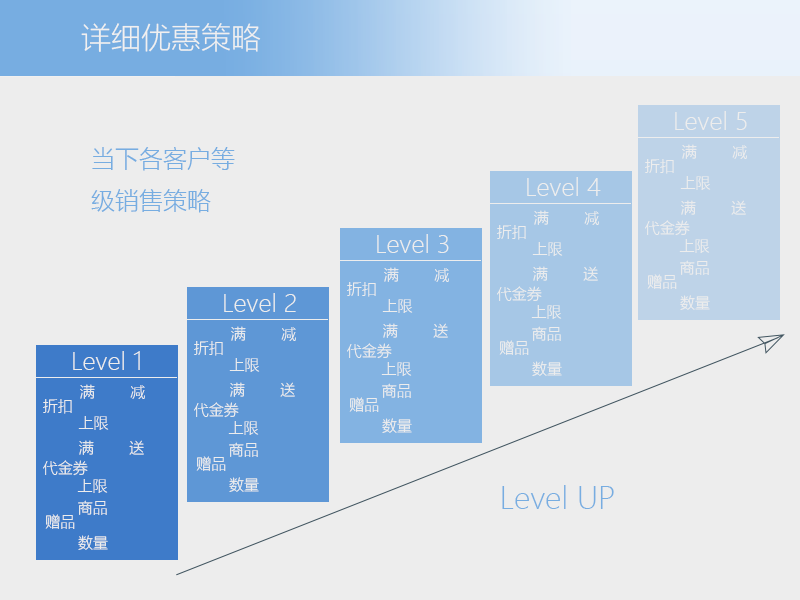
<style>
.page{position:relative;width:800px;height:600px;background:#ededed}
.page>*{position:absolute;margin:0}
.t1{font:30px "MicrosoftYaHeiLight";color:#f1f0f0}
.t2{font:24px "MicrosoftYaHeiLight";color:#ededed}
.t3{font:24px "MicrosoftYaHeiLight";color:#77ade1}
.t4{font:15px "MicrosoftYaHeiLight";color:#ededed}
.t5{font:30px "MicrosoftYaHeiLight";color:#77ade1}
</style>
<div class="page">
<p class="t1" style="left:81px;top:23px;width:180px;height:29px">详细优惠策略</p>
<p class="t2" style="left:675px;top:111px;width:72px;height:19px">Level 5</p>
<p class="t3" style="left:91px;top:147px;width:144px;height:66px">当下各客户等<br>级销售策略</p>
<p class="t4" style="left:682px;top:144px;width:65px;height:15px">满        减</p>
<p class="t4" style="left:645px;top:159px;width:29px;height:15px">折扣</p>
<p class="t2" style="left:527px;top:177px;width:74px;height:19px">Level 4</p>
<p class="t4" style="left:680px;top:176px;width:31px;height:14px">上限</p>
<p class="t4" style="left:681px;top:200px;width:65px;height:15px">满        送</p>
<p class="t4" style="left:534px;top:210px;width:65px;height:15px">满        减</p>
<p class="t4" style="left:645px;top:220px;width:45px;height:16px">代金券</p>
<p class="t4" style="left:497px;top:225px;width:29px;height:15px">折扣</p>
<p class="t2" style="left:377px;top:234px;width:72px;height:19px">Level 3</p>
<p class="t4" style="left:532px;top:242px;width:31px;height:14px">上限</p>
<p class="t4" style="left:679px;top:239px;width:31px;height:14px">上限</p>
<p class="t4" style="left:384px;top:267px;width:65px;height:15px">满        减</p>
<p class="t4" style="left:533px;top:266px;width:65px;height:15px">满        送</p>
<p class="t4" style="left:680px;top:260px;width:29px;height:15px">商品</p>
<p class="t4" style="left:647px;top:274px;width:30px;height:15px">赠品</p>
<p class="t2" style="left:224px;top:293px;width:72px;height:19px">Level 2</p>
<p class="t4" style="left:347px;top:282px;width:29px;height:15px">折扣</p>
<p class="t4" style="left:497px;top:286px;width:45px;height:16px">代金券</p>
<p class="t4" style="left:382px;top:299px;width:31px;height:14px">上限</p>
<p class="t4" style="left:531px;top:305px;width:31px;height:14px">上限</p>
<p class="t4" style="left:680px;top:295px;width:30px;height:15px">数量</p>
<p class="t4" style="left:231px;top:326px;width:65px;height:15px">满        减</p>
<p class="t4" style="left:383px;top:323px;width:65px;height:15px">满        送</p>
<p class="t4" style="left:532px;top:326px;width:29px;height:15px">商品</p>
<p class="t4" style="left:194px;top:341px;width:29px;height:15px">折扣</p>
<p class="t4" style="left:499px;top:340px;width:30px;height:15px">赠品</p>
<p class="t2" style="left:73px;top:351px;width:67px;height:19px">Level 1</p>
<p class="t4" style="left:347px;top:343px;width:45px;height:16px">代金券</p>
<p class="t4" style="left:229px;top:358px;width:31px;height:14px">上限</p>
<p class="t4" style="left:381px;top:362px;width:31px;height:14px">上限</p>
<p class="t4" style="left:532px;top:361px;width:30px;height:15px">数量</p>
<p class="t4" style="left:80px;top:384px;width:65px;height:15px">满        减</p>
<p class="t4" style="left:230px;top:382px;width:65px;height:15px">满        送</p>
<p class="t4" style="left:382px;top:383px;width:29px;height:15px">商品</p>
<p class="t4" style="left:43px;top:399px;width:29px;height:15px">折扣</p>
<p class="t4" style="left:349px;top:397px;width:30px;height:15px">赠品</p>
<p class="t4" style="left:194px;top:402px;width:45px;height:16px">代金券</p>
<p class="t4" style="left:78px;top:416px;width:31px;height:14px">上限</p>
<p class="t4" style="left:228px;top:421px;width:31px;height:14px">上限</p>
<p class="t4" style="left:382px;top:418px;width:30px;height:15px">数量</p>
<p class="t4" style="left:79px;top:440px;width:65px;height:15px">满        送</p>
<p class="t4" style="left:229px;top:442px;width:29px;height:15px">商品</p>
<p class="t4" style="left:43px;top:460px;width:45px;height:16px">代金券</p>
<p class="t4" style="left:196px;top:456px;width:30px;height:15px">赠品</p>
<p class="t4" style="left:77px;top:479px;width:31px;height:14px">上限</p>
<p class="t4" style="left:229px;top:477px;width:30px;height:15px">数量</p>
<p class="t5" style="left:502px;top:485px;width:112px;height:24px">Level UP</p>
<p class="t4" style="left:78px;top:500px;width:29px;height:15px">商品</p>
<p class="t4" style="left:45px;top:514px;width:30px;height:15px">赠品</p>
<p class="t4" style="left:78px;top:535px;width:30px;height:15px">数量</p>
</div>
